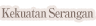
<style>
.page{position:relative;width:96px;height:26px;background:#ffffff}
.page>*{position:absolute;margin:0}
.t1{font:12.5px "RyuminPro-ExBold";letter-spacing:-0.08em;color:#9c8c83;scale:0.9 1}
</style>
<div class="page">
<p class="t1" style="left:1px;top:8px;width:93px;height:12px">Kekuatan Serangan</p>
</div>
